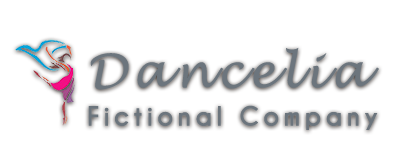
<style>
.page{position:relative;width:400px;height:152px;background:#ffffff}
.page>*{position:absolute;margin:0}
.t1{font:45.8px "LucidaHandwriting-Italic";letter-spacing:0.12em;color:#6c757d}
.t2{font:25px "CaviarDreams-Bold";letter-spacing:0.16em;color:#6c757d}
</style>
<div class="page">
<p class="t1" style="left:90px;top:47px;width:289px;height:43px">Dancelia</p>
<p class="t2" style="left:88px;top:105px;width:290px;height:25px">Fictional Company</p>
</div>
